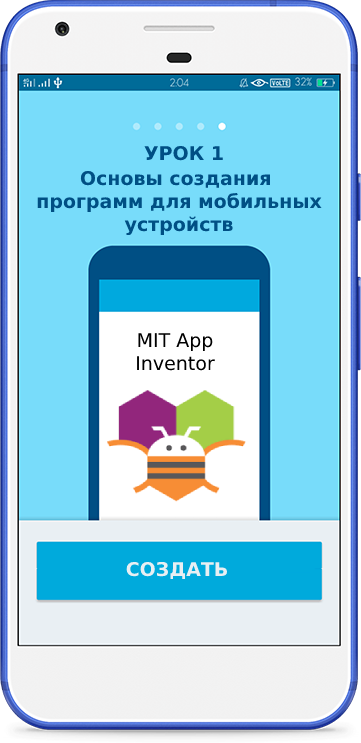
<style>
.page{position:relative;width:361px;height:743px;background:#78dcfa}
.page>*{position:absolute;margin:0}
.t1{font:19px "DejaVuSans-Bold";color:#004f84}
.t2{font:19px "DejaVuSans";color:#000000}
.t3{font:19px "DejaVuSans-Bold";color:#e9eff3}
</style>
<div class="page">
<p class="t1" style="left:144px;top:145px;width:79px;height:16px">УРОК 1</p>
<p class="t1" style="left:37px;top:170px;width:285px;height:66px;text-align:center">Основы создания <br>программ для мобильных<br>устройств</p>
<p class="t2" style="left:137px;top:333px;width:78px;height:38px;text-align:center">MIT App <br>Inventor</p>
<p class="t3" style="left:126px;top:561px;width:101px;height:18px">СОЗДАТЬ</p>
</div>
